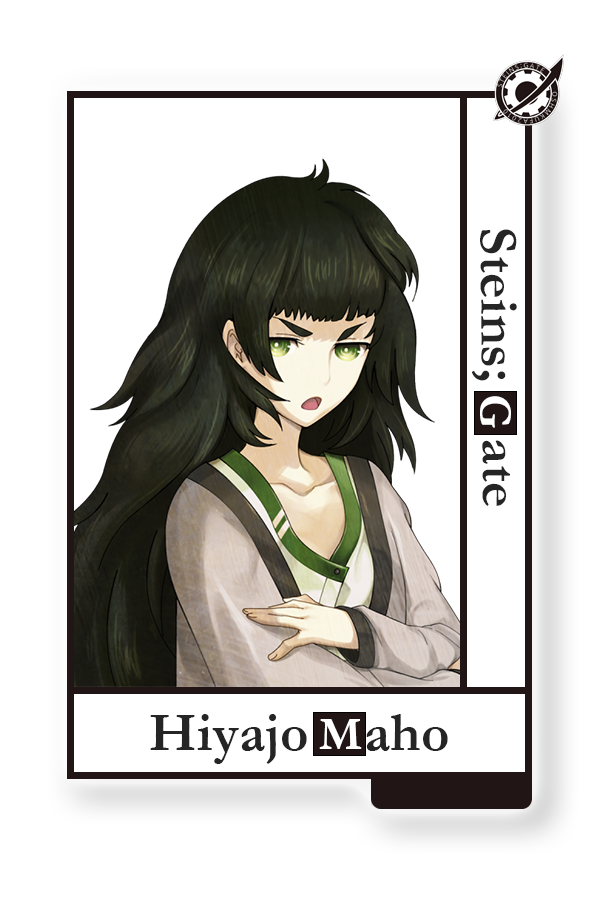
<style>
.page{position:relative;width:600px;height:900px;background:#ffffff}
.page>*{position:absolute;margin:0}
.t1{font:55.4px "Garamond-Bold";color:#252525}
.t2{font:47px "Garamond-Bold";color:#ffffff}
</style>
<div class="page">
<p class="t1" style="left:472px;top:229px;width:45px;height:277px;rotate:89deg">Steins;    ate</p>
<p class="t2" style="left:480px;top:396px;width:31px;height:32px;rotate:90deg">G</p>
<p class="t1" style="left:150px;top:714px;width:298px;height:50px">Hiyajo    aho</p>
<p class="t2" style="left:319px;top:719px;width:43px;height:30px">M</p>
</div>
